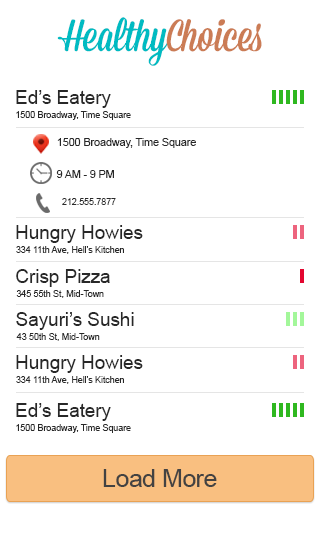
<style>
.page{position:relative;width:320px;height:558px;background:#ffffff}
.page>*{position:absolute;margin:0}
.t1{font:45px "Mission-Script";letter-spacing:-0.01em;color:#00bbc2}
.t2{font:45px "Mission-Script";letter-spacing:-0.01em;color:#cb7c55}
.t3{font:19.4px "ArialMT";letter-spacing:-0.01em;color:#282828}
.t4{font:9px "ArialMT";letter-spacing:-0.01em;color:#282828}
.t5{font:10.7px "ArialMT";letter-spacing:-0.01em;color:#282828}
.t6{font:9.3px "ArialMT";letter-spacing:-0.01em;color:#282828;scale:0.97 1}
.t7{font:24.5px "ArialMT";letter-spacing:-0.01em;color:#434242}
</style>
<div class="page">
<p class="t1" style="left:57px;top:17px;width:205px;height:49px">Healthy<span class="t2">Choices</span></p>
<p class="t3" style="left:16px;top:90px;width:95px;height:18px">Ed’s Eatery</p>
<p class="t4" style="left:16px;top:111px;width:115px;height:9px">1500 Broadway, Time Square</p>
<p class="t5" style="left:57px;top:138px;width:139px;height:10px">1500 Broadway, Time Square</p>
<p class="t5" style="left:56px;top:170px;width:58px;height:8px">9 AM - 9 PM</p>
<p class="t6" style="left:62px;top:198px;width:54px;height:7px">212.555.7877</p>
<p class="t3" style="left:16px;top:225px;width:127px;height:18px">Hungry Howies</p>
<p class="t4" style="left:16px;top:246px;width:108px;height:8px">334 11th Ave, Hell’s Kitchen</p>
<p class="t3" style="left:16px;top:269px;width:94px;height:18px">Crisp Pizza</p>
<p class="t4" style="left:16px;top:290px;width:88px;height:8px">345 55th St, Mid-Town</p>
<p class="t3" style="left:16px;top:312px;width:118px;height:18px">Sayuri’s Sushi</p>
<p class="t4" style="left:16px;top:333px;width:84px;height:8px">43 50th St, Mid-Town</p>
<p class="t3" style="left:16px;top:355px;width:127px;height:18px">Hungry Howies</p>
<p class="t4" style="left:16px;top:376px;width:108px;height:8px">334 11th Ave, Hell’s Kitchen</p>
<p class="t3" style="left:16px;top:403px;width:95px;height:18px">Ed’s Eatery</p>
<p class="t4" style="left:16px;top:424px;width:115px;height:9px">1500 Broadway, Time Square</p>
<p class="t7" style="left:103px;top:469px;width:114px;height:18px">Load More</p>
</div>
